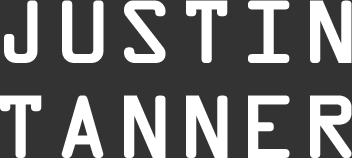
<style>
.page{position:relative;width:352px;height:158px;background:#333333}
.page>*{position:absolute;margin:0}
.t1{font:79px "OCRAStd";letter-spacing:0.035em;color:#ffffff;font-weight:bold}
</style>
<div class="page">
<p class="t1" style="left:0px;top:0px;width:352px;height:158px;text-align:center">JUSTIN<br>TANNER</p>
</div>
